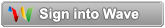
<style>
.page{position:relative;width:165px;height:28px}
.page>*{position:absolute;margin:0}
.t1{font:14px "Arial-BoldMT";color:#ffffff}
</style>
<div class="page">
<p class="t1" style="left:39px;top:8px;width:100px;height:14px">Sign into Wave</p>
</div>
